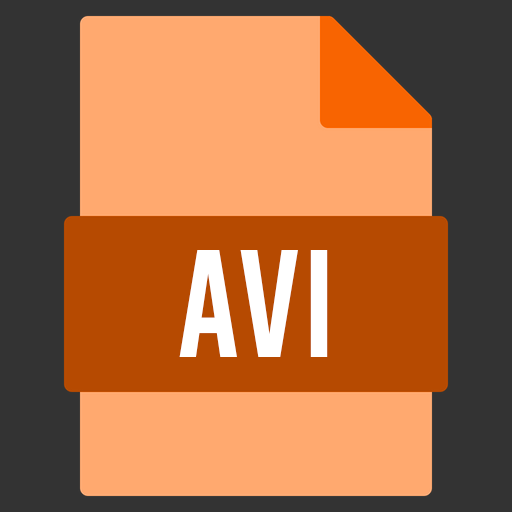
<style>
.page{position:relative;width:512px;height:512px;background:#ffa96f}
.page>*{position:absolute;margin:0}
.t1{font:153px "Bebas-Regular";color:#ffffff}
</style>
<div class="page">
<p class="t1" style="left:179px;top:250px;width:149px;height:107px">AVI</p>
</div>
